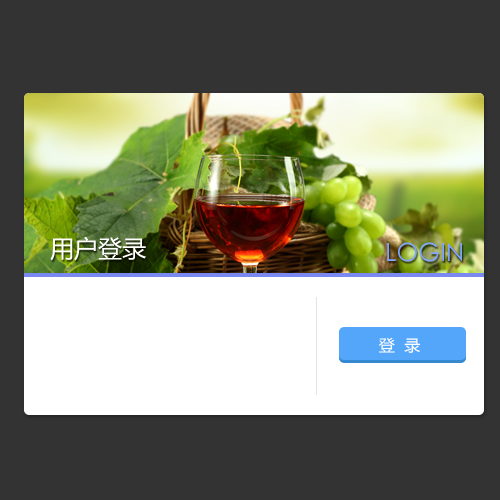
<style>
.page{position:relative;width:500px;height:500px;background:#333333}
.page>*{position:absolute;margin:0}
.t1{font:24px "MicrosoftYaHei";color:#ffffff}
.t2{font:25px "CenturyGothic";color:#81a4fd}
.t3{font:16px "MicrosoftYaHei";color:#ffffff}
</style>
<div class="page">
<p class="t1" style="left:50px;top:236px;width:96px;height:25px">用户登录</p>
<p class="t2" style="left:387px;top:242px;width:75px;height:20px">LOGIN</p>
<p class="t3" style="left:378px;top:337px;width:43px;height:16px">登  录</p>
</div>
